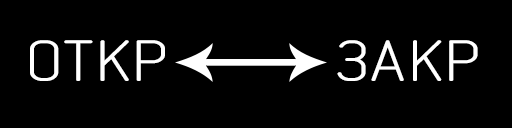
<style>
.page{position:relative;width:512px;height:128px;background:#000000}
.page>*{position:absolute;margin:0}
.t1{font:59.4px "Mipgost";color:#ffffff;scale:1.39 1}
</style>
<div class="page">
<p class="t1" style="left:30px;top:40px;width:135px;height:41px">ОТКР</p>
<p class="t1" style="left:337px;top:40px;width:141px;height:41px">ЗАКР</p>
</div>
